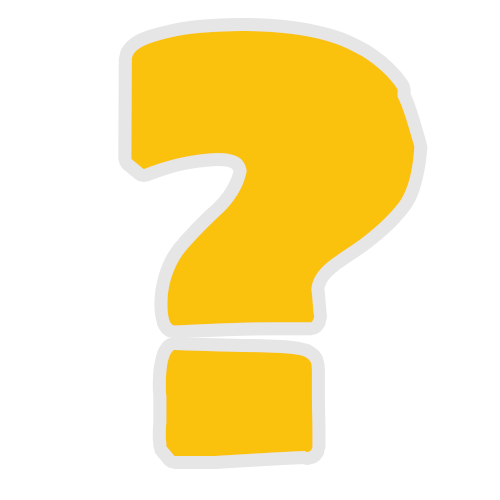
<style>
.page{position:relative;width:500px;height:500px;background:#ffffff}
.page>*{position:absolute;margin:0}
.t1{font:552.1px "BowlbyOneSC-Regular";color:#fac20d}
</style>
<div class="page">
<p class="t1" style="left:131px;top:31px;width:284px;height:425px">?</p>
</div>
